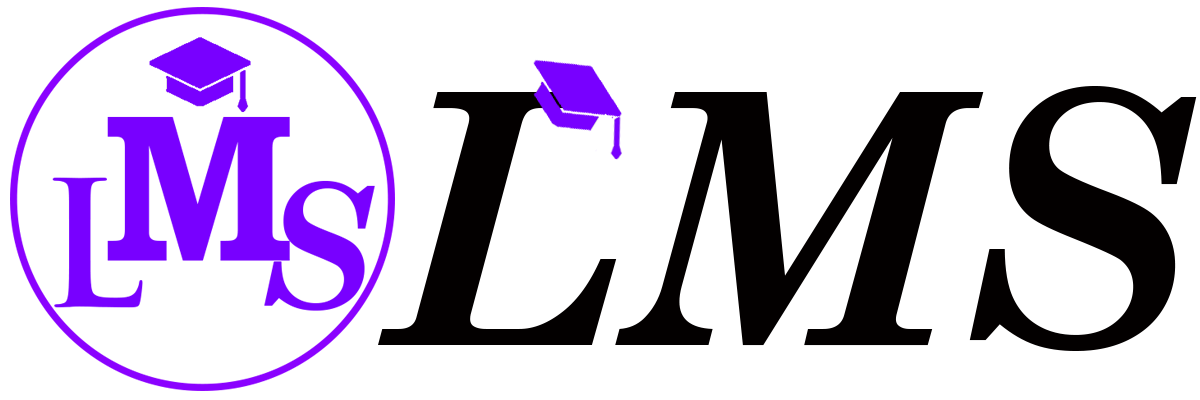
<style>
.page{position:relative;width:1200px;height:400px;background:#ffffff}
.page>*{position:absolute;margin:0}
.t1{font:350px "CenturySchoolbook-BoldItalic";color:#030000}
</style>
<div class="page">
<p class="t1" style="left:378px;top:86px;width:819px;height:265px">LMS</p>
</div>
